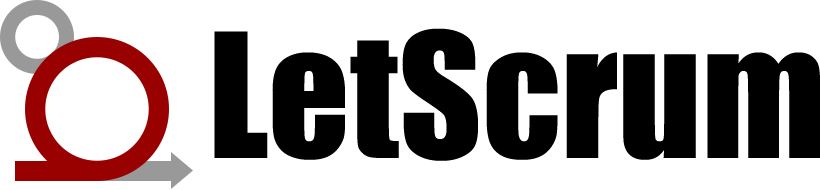
<style>
.page{position:relative;width:820px;height:190px;background:#ffffff}
.page>*{position:absolute;margin:0}
.t1{font:160px "Impact";color:#000000}
</style>
<div class="page">
<p class="t1" style="left:214px;top:28px;width:606px;height:133px">LetScrum</p>
</div>
